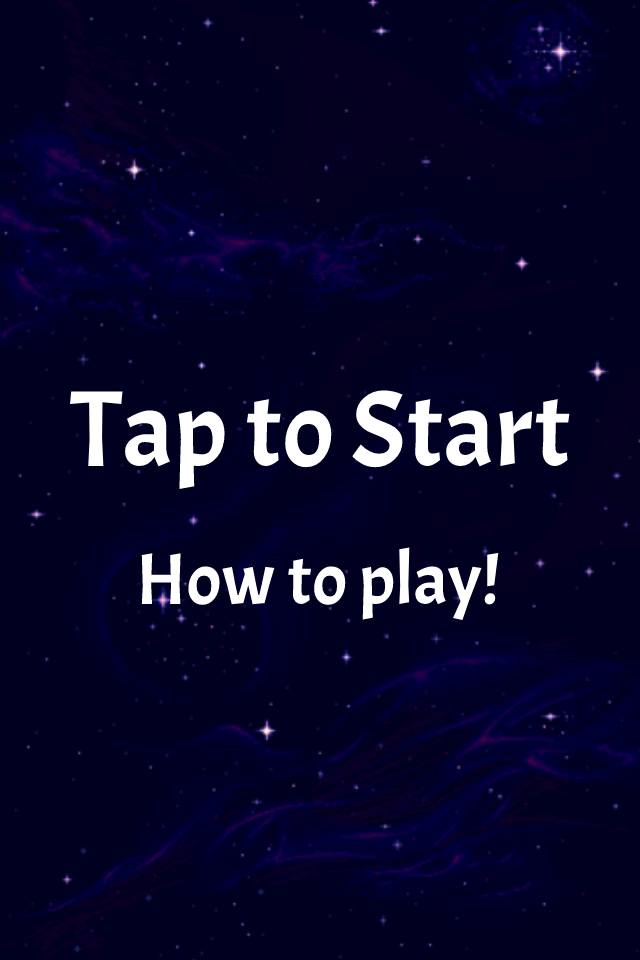
<style>
.page{position:relative;width:640px;height:960px;background:#000020}
.page>*{position:absolute;margin:0}
.t1{font:108px "Acme-Regular";color:#ffffff}
.t2{font:73px "Acme-Regular";color:#ffffff}
</style>
<div class="page">
<p class="t1" style="left:70px;top:390px;width:500px;height:100px">Tap to Start</p>
<p class="t2" style="left:141px;top:547px;width:358px;height:74px">How to play!</p>
</div>
